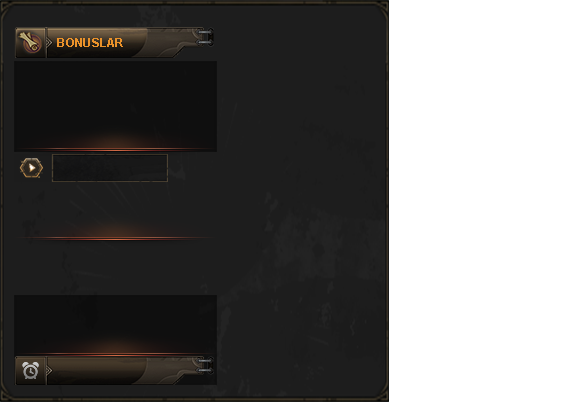
<style>
.page{position:relative;width:566px;height:402px;background:#1d1d1d}
.page>*{position:absolute;margin:0}
.t1{font:12px "Arial-BoldMT";color:#eb922a}
</style>
<div class="page">
<p class="t1" style="left:57px;top:38px;width:66px;height:9px">BONUSLAR</p>
</div>
